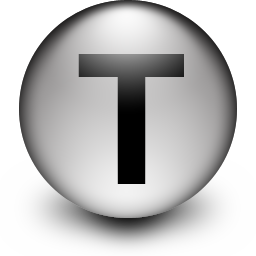
<style>
.page{position:relative;width:256px;height:256px}
.page>*{position:absolute;margin:0}
.t1{font:180px "Helvetica-Bold";color:#000000}
</style>
<div class="page">
<p class="t1" style="left:78px;top:54px;width:106px;height:130px">T</p>
</div>
